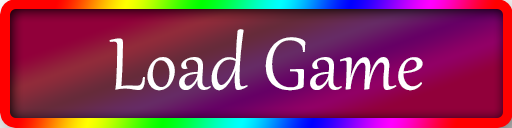
<style>
.page{position:relative;width:512px;height:128px}
.page>*{position:absolute;margin:0}
.t1{font:90px "Gabriola";color:#ffffff}
</style>
<div class="page">
<p class="t1" style="left:109px;top:29px;width:314px;height:62px">Load Game</p>
</div>
